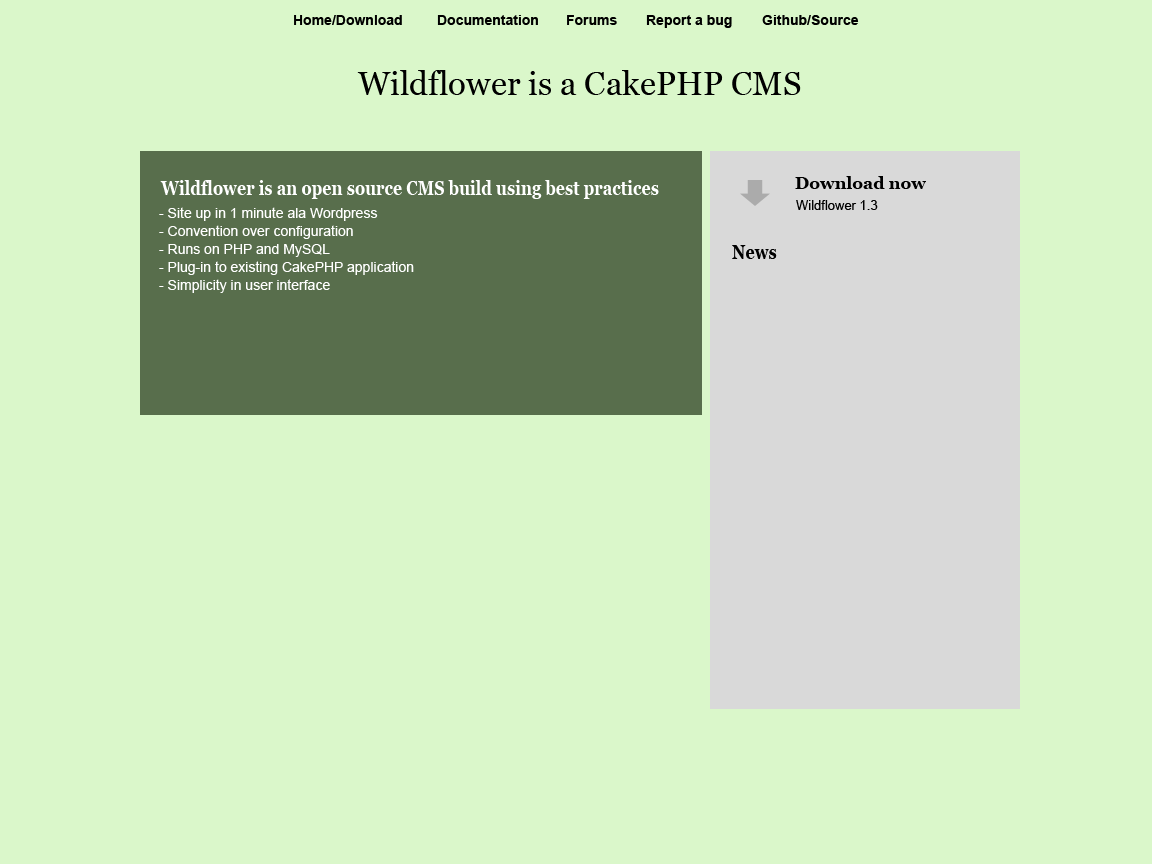
<style>
.page{position:relative;width:1152px;height:864px;background:#daf7ca}
.page>*{position:absolute;margin:0}
.t1{font:14px "Arial-BoldMT";color:#000000}
.t2{font:33px "Georgia";color:#000000}
.t3{font:20.2px "Georgia-Bold";color:#ffffff;scale:0.8 1}
.t4{font:17px "Georgia-Bold";color:#000000}
.t5{font:14px/18px "ArialMT";color:#ffffff}
.t6{font:13px "ArialMT";color:#000000}
.t7{font:20.2px "Georgia-Bold";color:#000000;scale:0.8 1}
</style>
<div class="page">
<p class="t1" style="left:294px;top:15px;width:108px;height:10px">Home/Download</p>
<p class="t1" style="left:437px;top:15px;width:101px;height:10px">Documentation</p>
<p class="t1" style="left:567px;top:15px;width:50px;height:10px">Forums</p>
<p class="t1" style="left:646px;top:15px;width:86px;height:13px">Report a bug</p>
<p class="t1" style="left:762px;top:15px;width:97px;height:10px">Github/Source</p>
<p class="t2" style="left:357px;top:70px;width:444px;height:25px">Wildflower is a CakePHP CMS</p>
<p class="t3" style="left:160px;top:180px;width:499px;height:19px">Wildflower is an open source CMS build using best practices</p>
<p class="t4" style="left:795px;top:176px;width:131px;height:13px">Download now</p>
<p class="t5" style="left:159px;top:207px;width:255px;height:86px">- Site up in 1 minute ala Wordpress<br>- Convention over configuration<br>- Runs on PHP and MySQL<br>- Plug-in to existing CakePHP application<br>- Simplicity in user interface</p>
<p class="t6" style="left:796px;top:200px;width:82px;height:10px">Wildflower 1.3</p>
<p class="t7" style="left:732px;top:245px;width:45px;height:14px">News</p>
</div>
